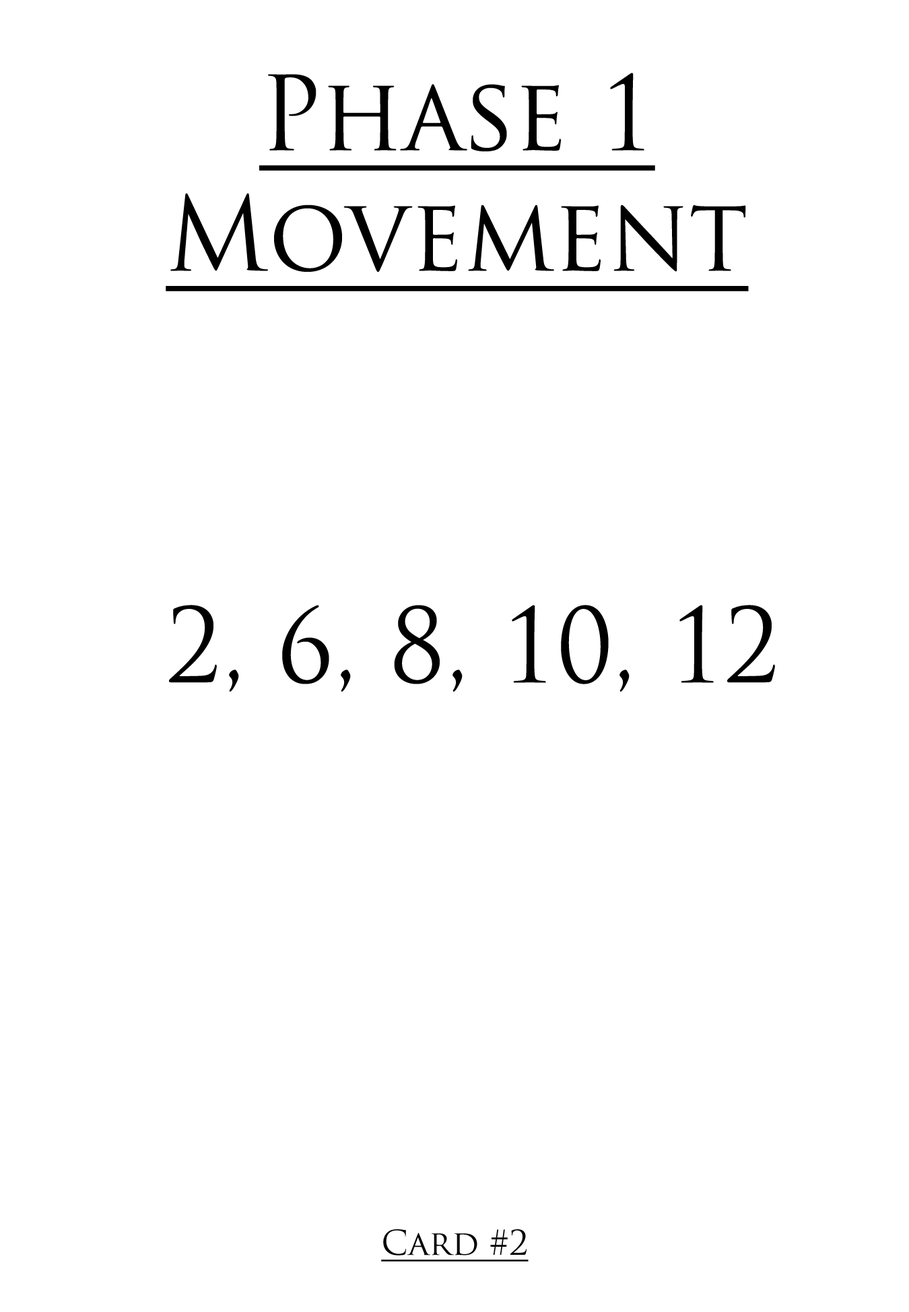
<style>
.page{position:relative;width:909px;height:1312px;background:#ffffff}
.page>*{position:absolute;margin:0}
.t1{font:100.6px "TrajanPro-Regular";color:#000000;text-decoration:underline;scale:0.97 1}
.t2{font:100.6px "TrajanPro-Regular";color:#000000;scale:0.97 1}
.t3{font:33.5px "TrajanPro-Regular";color:#000000;text-decoration:underline}
</style>
<div class="page">
<p class="t1" style="left:166px;top:73px;width:582px;height:218px;text-align:center">Phase 1<br>Movement</p>
<p class="t2" style="left:169px;top:605px;width:606px;height:87px">2, 6, 8, 10, 12</p>
<p class="t3" style="left:381px;top:1230px;width:147px;height:32px">Card #2</p>
</div>
